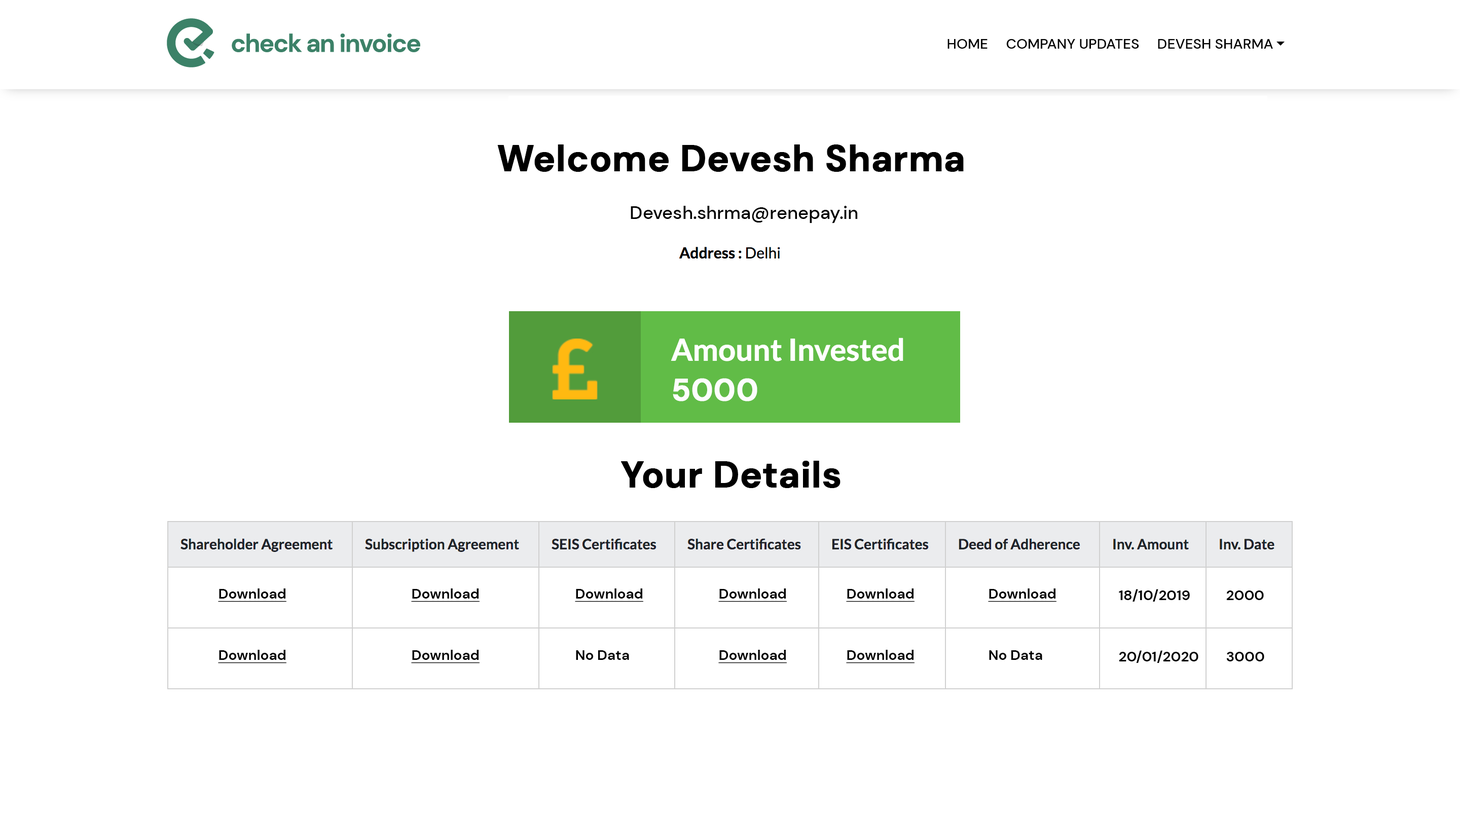
<style>
.page{position:relative;width:1460px;height:816px;background:#ffffff}
.page>*{position:absolute;margin:0}
.t1{font:14.2px "DMSans-Medium";color:#000000;text-transform:uppercase}
.t2{font:36.5px "DMSans-Bold";color:#000000;font-weight:bold}
.t3{font:18.3px "DMSans-Medium";color:#000000}
.t4{font:30.4px "DMSans-Bold";color:#fdfdfd;font-weight:bold}
.t5{font:14.2px "DMSans-Bold";color:#000000;text-decoration:underline}
.t6{font:14.2px "DMSans-Bold";color:#000000}
</style>
<div class="page">
<p class="t1" style="left:948px;top:39px;width:325px;height:10px">Home     Company Updates     devesh sharma</p>
<p class="t2" style="left:497px;top:145px;width:467px;height:27px">Welcome Devesh Sharma</p>
<p class="t3" style="left:631px;top:206px;width:227px;height:17px">Devesh.shrma@renepay.in</p>
<p class="t4" style="left:673px;top:378px;width:85px;height:24px">5000</p>
<p class="t2" style="left:621px;top:461px;width:220px;height:27px">Your Details</p>
<p class="t5" style="left:218px;top:589px;width:69px;height:13px">Download</p>
<p class="t5" style="left:411px;top:589px;width:69px;height:13px">Download</p>
<p class="t5" style="left:575px;top:589px;width:69px;height:13px">Download</p>
<p class="t5" style="left:719px;top:589px;width:68px;height:13px">Download</p>
<p class="t5" style="left:846px;top:589px;width:69px;height:13px">Download</p>
<p class="t5" style="left:988px;top:589px;width:69px;height:13px">Download</p>
<p class="t6" style="left:1119px;top:589px;width:71px;height:13px">18/10/2019</p>
<p class="t6" style="left:1227px;top:591px;width:37px;height:9px">2000</p>
<p class="t5" style="left:218px;top:650px;width:69px;height:14px">Download</p>
<p class="t5" style="left:411px;top:650px;width:69px;height:14px">Download</p>
<p class="t6" style="left:576px;top:651px;width:53px;height:9px">No Data</p>
<p class="t5" style="left:719px;top:650px;width:68px;height:14px">Download</p>
<p class="t5" style="left:846px;top:650px;width:69px;height:14px">Download</p>
<p class="t6" style="left:989px;top:651px;width:54px;height:9px">No Data</p>
<p class="t6" style="left:1119px;top:651px;width:80px;height:12px">20/01/2020</p>
<p class="t6" style="left:1227px;top:652px;width:38px;height:10px">3000</p>
</div>
